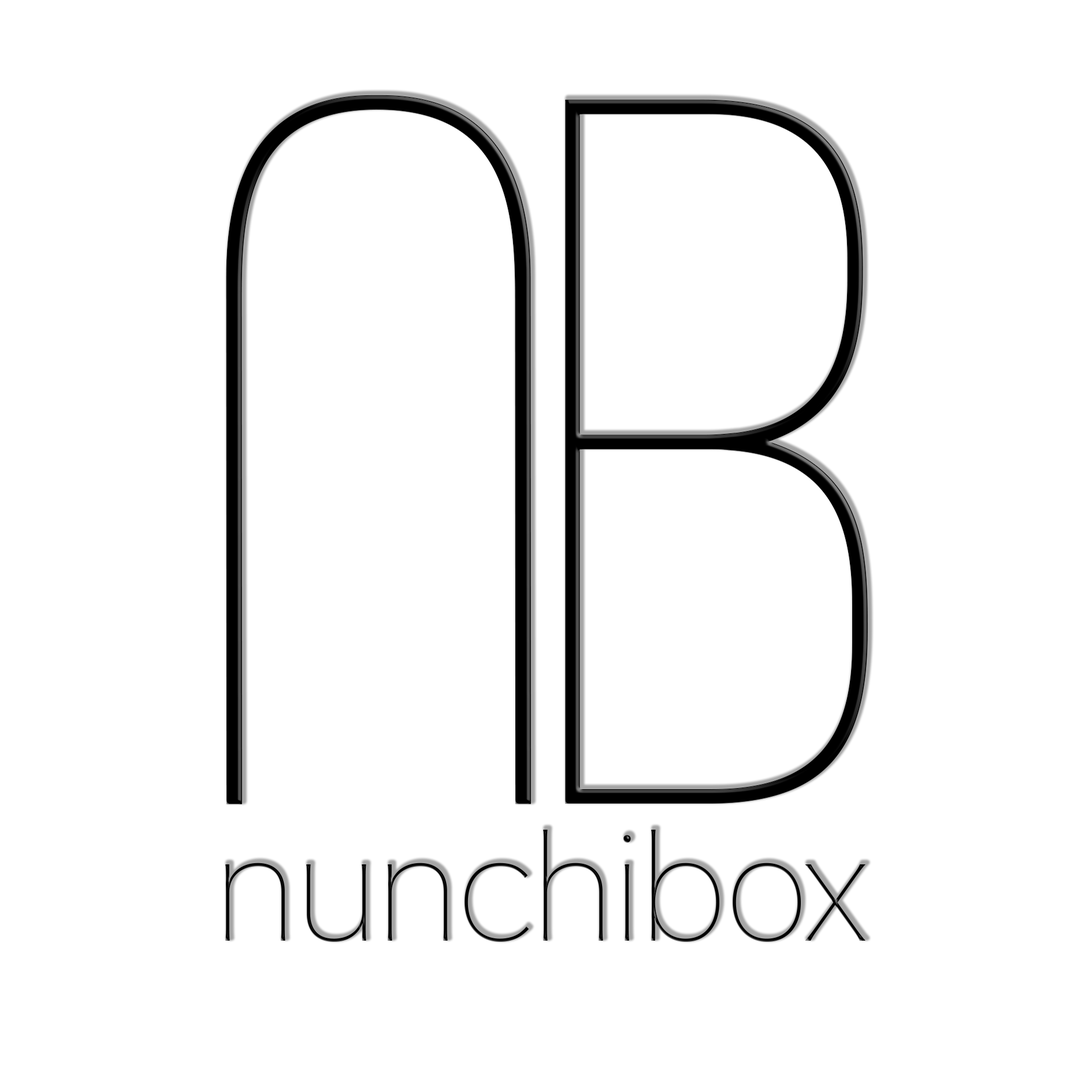
<style>
.page{position:relative;width:1092px;height:1092px;background:#ffffff}
.page>*{position:absolute;margin:0}
.t1{font:963px "Headlines-Thin";color:#000000}
.t2{font:146.3px "HiraginoSans-W0";color:#000000}
</style>
<div class="page">
<p class="t1" style="left:226px;top:95px;width:305px;height:709px;rotate:180deg">U</p>
<p class="t1" style="left:565px;top:99px;width:303px;height:705px">B</p>
<p class="t2" style="left:225px;top:830px;width:640px;height:112px">nunchibox</p>
</div>
